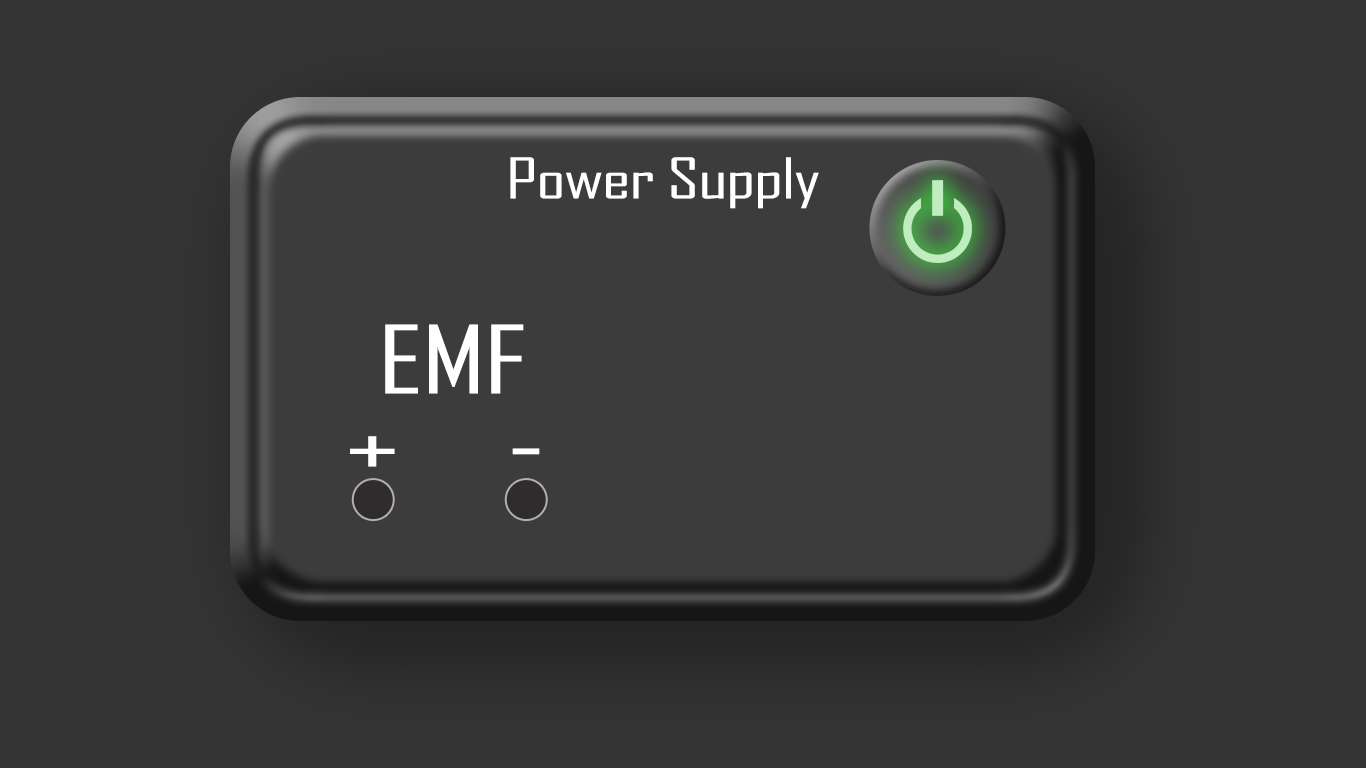
<style>
.page{position:relative;width:1366px;height:768px;background:#333333}
.page>*{position:absolute;margin:0}
.t1{font:54px "AgencyFB-Reg";letter-spacing:-0.02em;color:#ffffff;scale:1.44 1}
.t2{font:90px "AgencyFB-Reg";letter-spacing:-0.02em;color:#ffffff;scale:1.44 1}
</style>
<div class="page">
<p class="t1" style="left:510px;top:157px;width:309px;height:52px">Power Supply</p>
<p class="t2" style="left:385px;top:324px;width:139px;height:70px">EMF</p>
<p class="t2" style="left:350px;top:436px;width:45px;height:31px">+</p>
<p class="t2" style="left:512px;top:448px;width:28px;height:7px">-</p>
</div>
